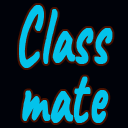
<style>
.page{position:relative;width:128px;height:128px;background:#000209}
.page>*{position:absolute;margin:0}
.t1{font:79.2px "Caveat-Bold";color:#03c4eb;font-weight:bold;scale:0.61 1}
</style>
<div class="page">
<p class="t1" style="left:19px;top:5px;width:94px;height:118px">Class mate</p>
</div>
